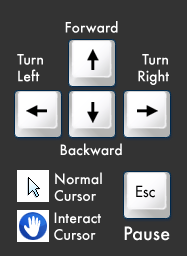
<style>
.page{position:relative;width:187px;height:256px;background:#333333}
.page>*{position:absolute;margin:0}
.t1{font:14px "Futura-Medium";color:#ffffff}
.t2{font:15px "Futura";letter-spacing:0.01em;color:#000000}
.t3{font:18px "Futura-Medium";color:#ffffff}
</style>
<div class="page">
<p class="t1" style="left:65px;top:21px;width:53px;height:12px">Forward</p>
<p class="t1" style="left:17px;top:54px;width:26px;height:28px">Turn<br>Left</p>
<p class="t1" style="left:138px;top:54px;width:31px;height:31px;text-align:right">Turn<br>Right</p>
<p class="t1" style="left:60px;top:143px;width:62px;height:13px">Backward</p>
<p class="t1" style="left:54px;top:172px;width:48px;height:29px">Normal<br>Cursor</p>
<p class="t2" style="left:136px;top:185px;width:19px;height:13px">Esc</p>
<p class="t1" style="left:54px;top:212px;width:47px;height:28px">Interact<br>Cursor</p>
<p class="t3" style="left:124px;top:226px;width:46px;height:15px">Pause</p>
</div>
